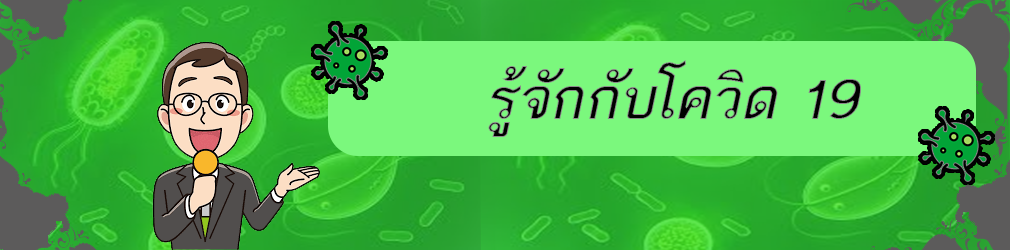
<style>
.page{position:relative;width:1010px;height:250px;background:#7bf87d}
.page>*{position:absolute;margin:0}
.t1{font:80px "THBaijam-BoldItalic"}
</style>
<div class="page">
<p class="t1" style="left:488px;top:60px;width:373px;height:77px">รู้จักกับโควิด 19</p>
</div>
